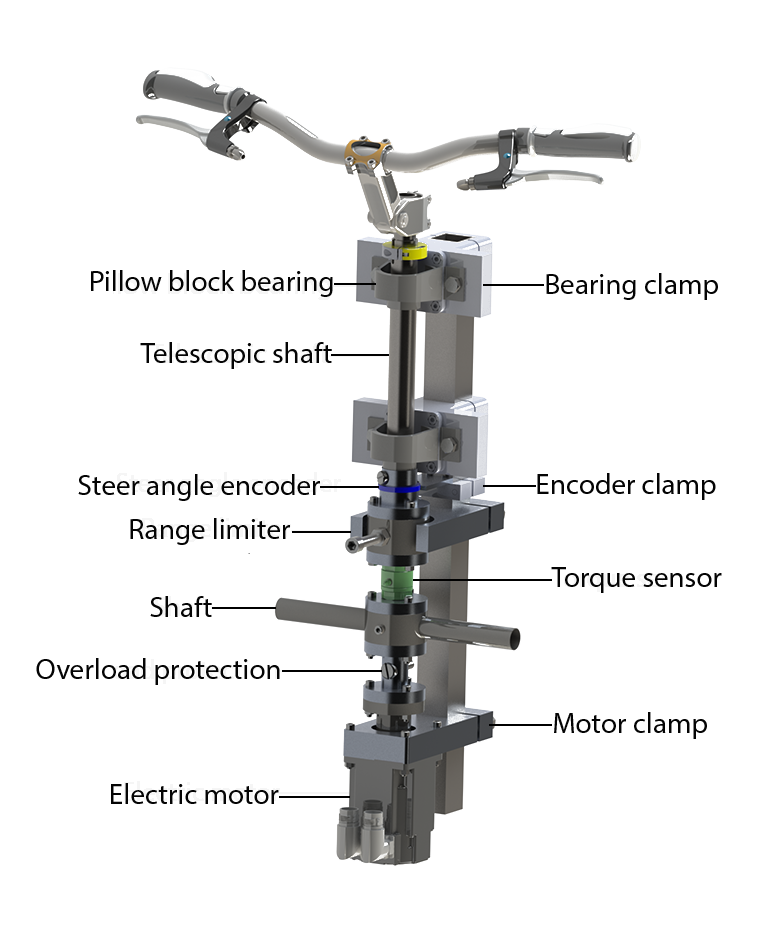
<style>
.page{position:relative;width:776px;height:928px;background:#ffffff}
.page>*{position:absolute;margin:0}
.t1{font:29.2px "MyriadPro-Regular";color:#040404}
</style>
<div class="page">
<p class="t1" style="left:91px;top:270px;width:242px;height:27px">Pillow block bearing</p>
<p class="t1" style="left:546px;top:273px;width:172px;height:27px">Bearing clamp</p>
<p class="t1" style="left:140px;top:342px;width:192px;height:27px">Telescopic shaft</p>
<p class="t1" style="left:78px;top:474px;width:242px;height:27px">Steer angle encoder</p>
<p class="t1" style="left:130px;top:518px;width:160px;height:27px">Range limiter</p>
<p class="t1" style="left:551px;top:567px;width:171px;height:26px">Torque sensor</p>
<p class="t1" style="left:150px;top:596px;width:62px;height:21px">Shaft</p>
<p class="t1" style="left:36px;top:658px;width:244px;height:27px">Overload protection</p>
<p class="t1" style="left:554px;top:712px;width:153px;height:27px">Motor clamp</p>
<p class="t1" style="left:111px;top:783px;width:168px;height:21px">Electric motor</p>
</div>
